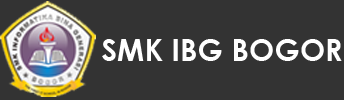
<style>
.page{position:relative;width:344px;height:100px;background:#333333}
.page>*{position:absolute;margin:0}
.t1{font:30.2px "CenturyGothic-Bold";color:#ffffff;text-transform:uppercase}
</style>
<div class="page">
<p class="t1" style="left:102px;top:39px;width:240px;height:22px">SMK IBG BOGOR</p>
</div>
